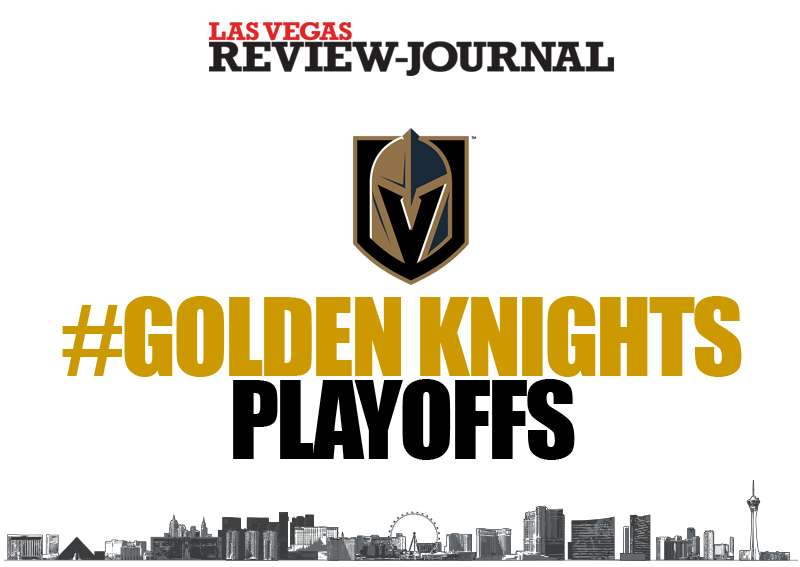
<style>
.page{position:relative;width:800px;height:567px;background:#ffffff}
.page>*{position:absolute;margin:0}
.t1{font:100px/83.3px "Impact";letter-spacing:-0.03em;color:#cc9900;text-transform:uppercase}
.t2{font:100px/83.3px "Impact";letter-spacing:-0.03em;color:#000000;text-transform:uppercase}
</style>
<div class="page">
<p class="t1" style="left:62px;top:296px;width:680px;height:164px;text-align:center">#golden knights<br><span class="t2">playoffs</span></p>
</div>
